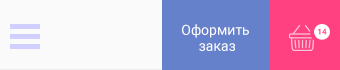
<style>
.page{position:relative;width:340px;height:70px;background:#fafafa}
.page>*{position:absolute;margin:0}
.t1{font:14px/16px "Roboto-Regular";color:#ffffff}
.t2{font:8.2px "Roboto-Bold";text-transform:uppercase}
</style>
<div class="page">
<p class="t1" style="left:182px;top:24px;width:67px;height:27px;text-align:center">Оформить <br>заказ</p>
<p class="t2" style="left:318px;top:28px;width:9px;height:7px">14</p>
</div>
